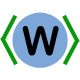
<style>
.page{position:relative;width:80px;height:80px;background:#ffffff}
.page>*{position:absolute;margin:0}
.t1{font:39.9px "ArialRoundedMTBold";color:#000000}
</style>
<div class="page">
<p class="t1" style="left:22px;top:26px;width:37px;height:30px">W</p>
</div>
